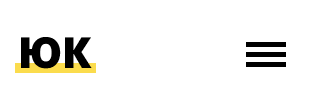
<style>
.page{position:relative;width:320px;height:109px;background:#ffffff}
.page>*{position:absolute;margin:0}
.t1{font:42px "Mplus1p-Black";color:#000000}
</style>
<div class="page">
<p class="t1" style="left:21px;top:37px;width:71px;height:32px">ЮК</p>
</div>
